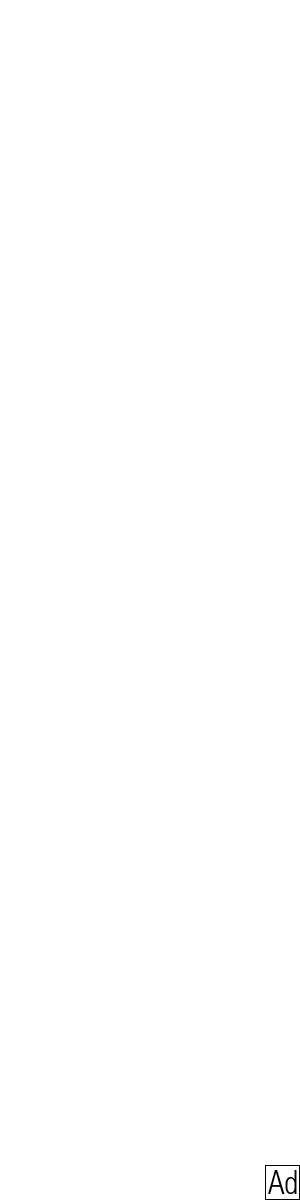
<style>
.page{position:relative;width:300px;height:1200px;background:#ffffff}
.page>*{position:absolute;margin:0}
.t1{font:32.7px "ArialNovaCond-Light";color:#000000}
</style>
<div class="page">
<p class="t1" style="left:268px;top:1170px;width:29px;height:24px">Ad</p>
</div>
